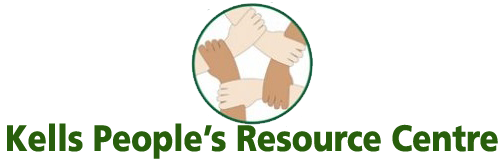
<style>
.page{position:relative;width:500px;height:160px;background:#ffffff}
.page>*{position:absolute;margin:0}
.t1{font:36.7px "ArticulateExtrabold";color:#285f0c;scale:0.85 1}
</style>
<div class="page">
<p class="t1" style="left:7px;top:123px;width:491px;height:36px">Kells People’s Resource Centre</p>
</div>
